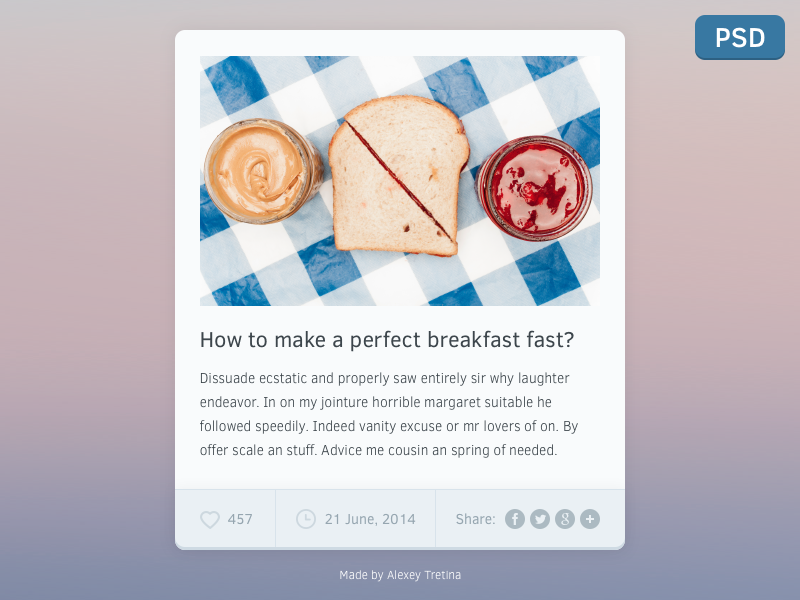
<style>
.page{position:relative;width:800px;height:600px}
.page>*{position:absolute;margin:0}
.t1{font:28px "ClearSans-Medium";color:#ffffff}
.t2{font:22px "ClearSans";color:#3d464c}
.t3{font:14px/24px "ClearSans-Light";color:#3d464c}
.t4{font:14px "ClearSans";color:#96a6b0}
.t5{font:12px "ClearSans-Light";color:#ffffff}
</style>
<div class="page">
<p class="t1" style="left:716px;top:27px;width:49px;height:21px">PSD</p>
<p class="t2" style="left:201px;top:330px;width:373px;height:22px">How to make a perfect breakfast fast?</p>
<p class="t3" style="left:200px;top:372px;width:378px;height:86px">Dissuade ecstatic and properly saw entirely sir why laughter endeavor. In on my jointure horrible margaret suitable he followed speedily. Indeed vanity excuse or mr lovers of on. By offer scale an stuff. Advice me cousin an spring of needed.</p>
<p class="t4" style="left:228px;top:514px;width:24px;height:11px">457</p>
<p class="t4" style="left:325px;top:513px;width:91px;height:13px">21 June, 2014</p>
<p class="t4" style="left:456px;top:513px;width:39px;height:12px">Share:</p>
<p class="t5" style="left:340px;top:570px;width:121px;height:12px">Made by Alexey Tretina</p>
</div>
